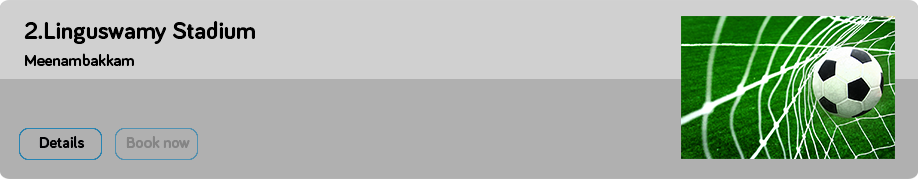
<style>
.page{position:relative;width:918px;height:179px;background:#b0b0b0}
.page>*{position:absolute;margin:0}
.t1{font:25px "Bariol-Bold";color:#000000}
.t2{font:16.7px "Bariol-Bold";color:#000000}
.t3{font:16.7px "Bariol-Bold";color:#020204}
.t4{font:16.7px "Bariol-Bold";color:#858585}
</style>
<div class="page">
<p class="t1" style="left:24px;top:21px;width:231px;height:23px">2.Linguswamy Stadium</p>
<p class="t2" style="left:25px;top:53px;width:109px;height:13px">Meenambakkam</p>
<p class="t3" style="left:39px;top:136px;width:46px;height:12px">Details</p>
<p class="t4" style="left:126px;top:136px;width:64px;height:12px">Book now</p>
</div>
